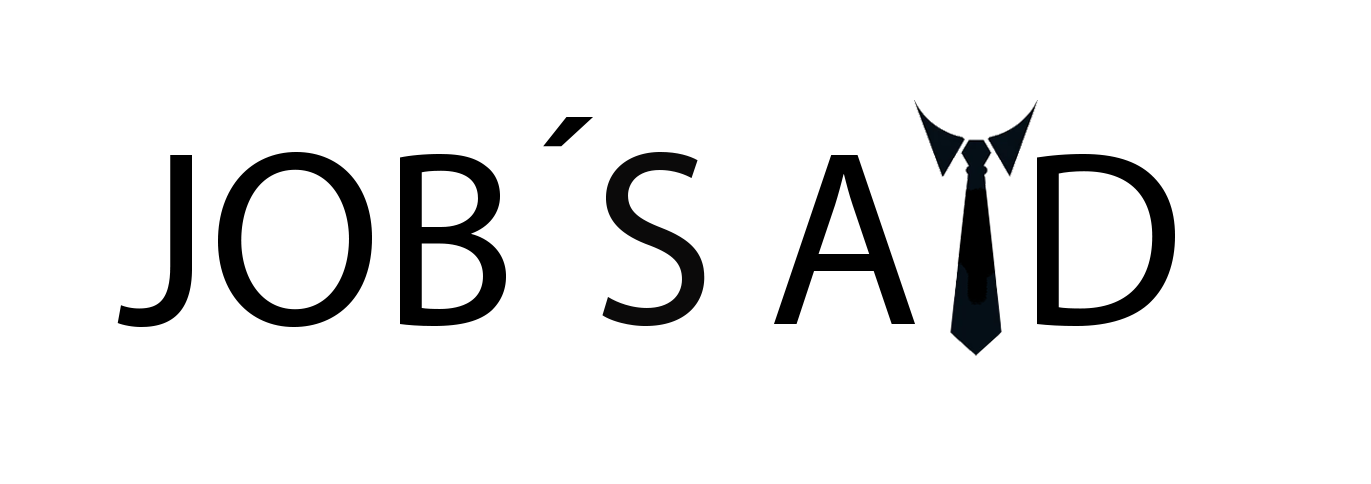
<style>
.page{position:relative;width:1371px;height:484px;background:#ffffff}
.page>*{position:absolute;margin:0}
.t1{font:250px "MyriadPro-Regular";color:#000000}
.t2{font:250px "MyriadPro-Regular";color:#0b0a0a}
.t3{font:250px "MyriadPro-Regular";letter-spacing:0.075em;color:#000000}
.t4{font:250px "MyriadPro-Regular";letter-spacing:0.075em;color:#ffffff}
</style>
<div class="page">
<p class="t1" style="left:117px;top:117px;width:1058px;height:210px">JOB´<span class="t2">S </span><span class="t3">A</span><span class="t4">I</span><span class="t3">D</span></p>
</div>
